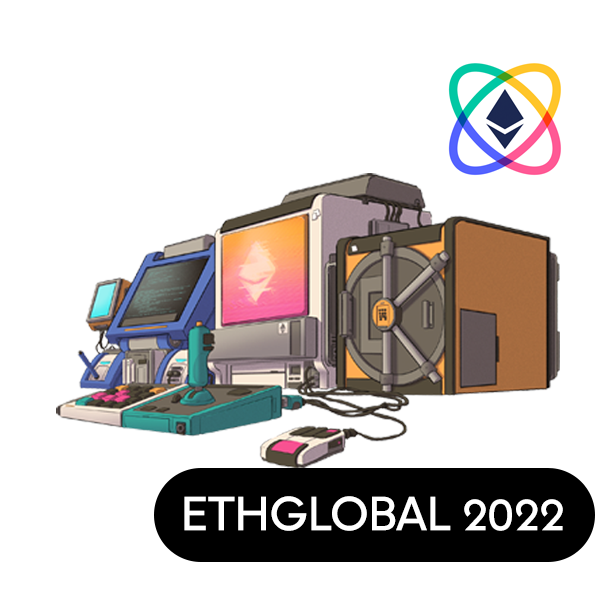
<style>
.page{position:relative;width:616px;height:616px;background:#ffffff}
.page>*{position:absolute;margin:0}
.t1{font:47.9px "Strawford-Medium";letter-spacing:-0.03em;color:#ffffff}
</style>
<div class="page">
<p class="t1" style="left:184px;top:496px;width:379px;height:35px">ETHGLOBAL 2022</p>
</div>
